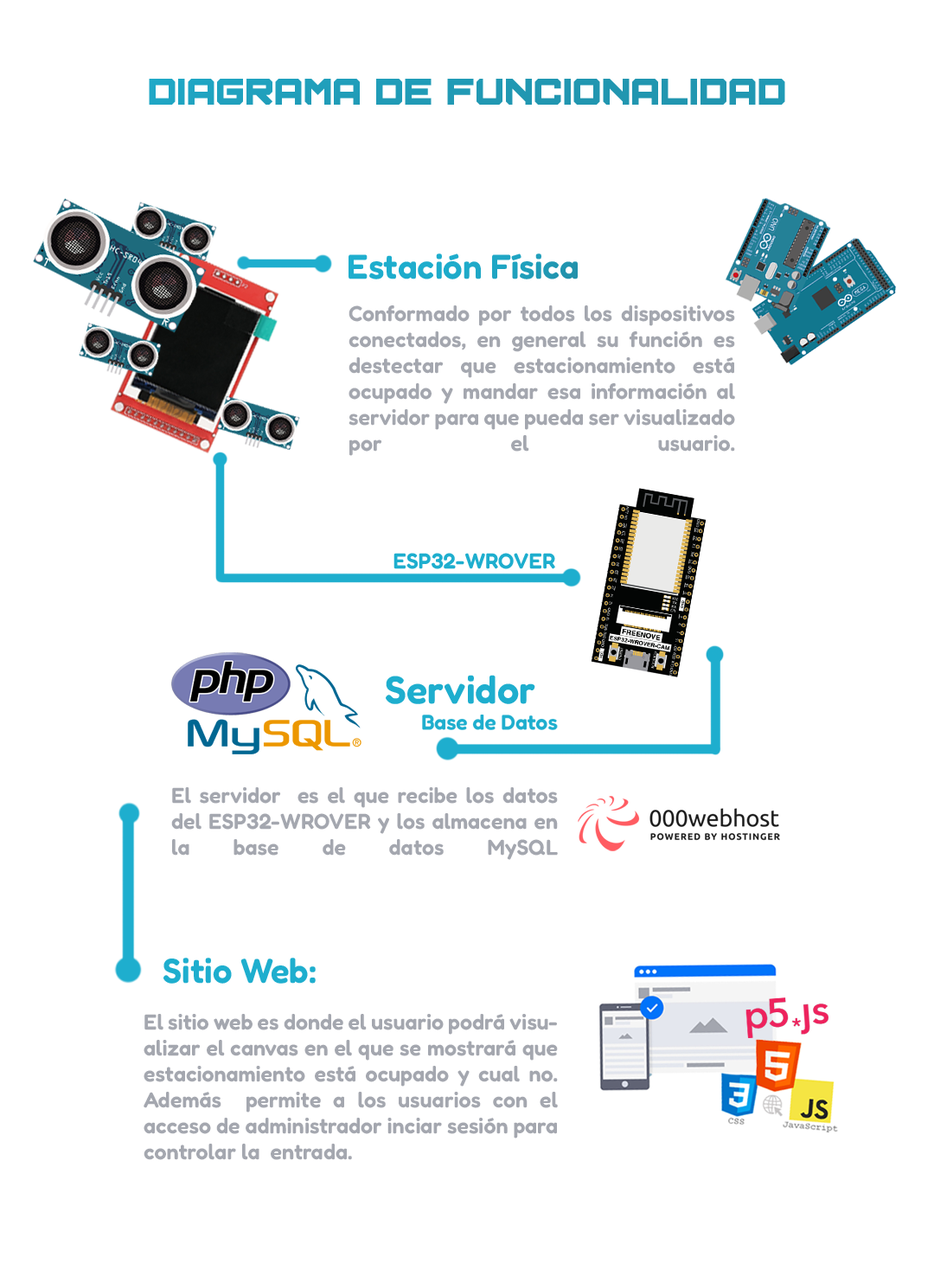
<style>
.page{position:relative;width:934px;height:1276px;background:#ffffff}
.page>*{position:absolute;margin:0}
.t1{font:21.6px "Fredoka-SemiBold";color:#a4a7af}
</style>
<div class="page">
<p class="t1" style="left:349px;top:305px;width:386px;height:151px;text-align:justify">Conformado por todos los dispositivos <br>conectados, en general su función es<br>destectar que estacionamiento está <br>ocupado y mandar esa información al <br>servidor para que pueda ser visualizado<br>por el usuario.</p>
<p class="t1" style="left:171px;top:787px;width:387px;height:73px;text-align:justify">El servidor  es el que recibe los datos del ESP32-WROVER y los almacena en la base de datos MySQL</p>
<p class="t1" style="left:144px;top:1014px;width:414px;height:146px;text-align:justify">El sitio web es donde el usuario podrá visualizar el canvas en el que se mostrará que estacionamiento está ocupado y cual no.<br>Además  permite a los usuarios con el acceso de administrador inciar sesión para controlar la  entrada.</p>
</div>
